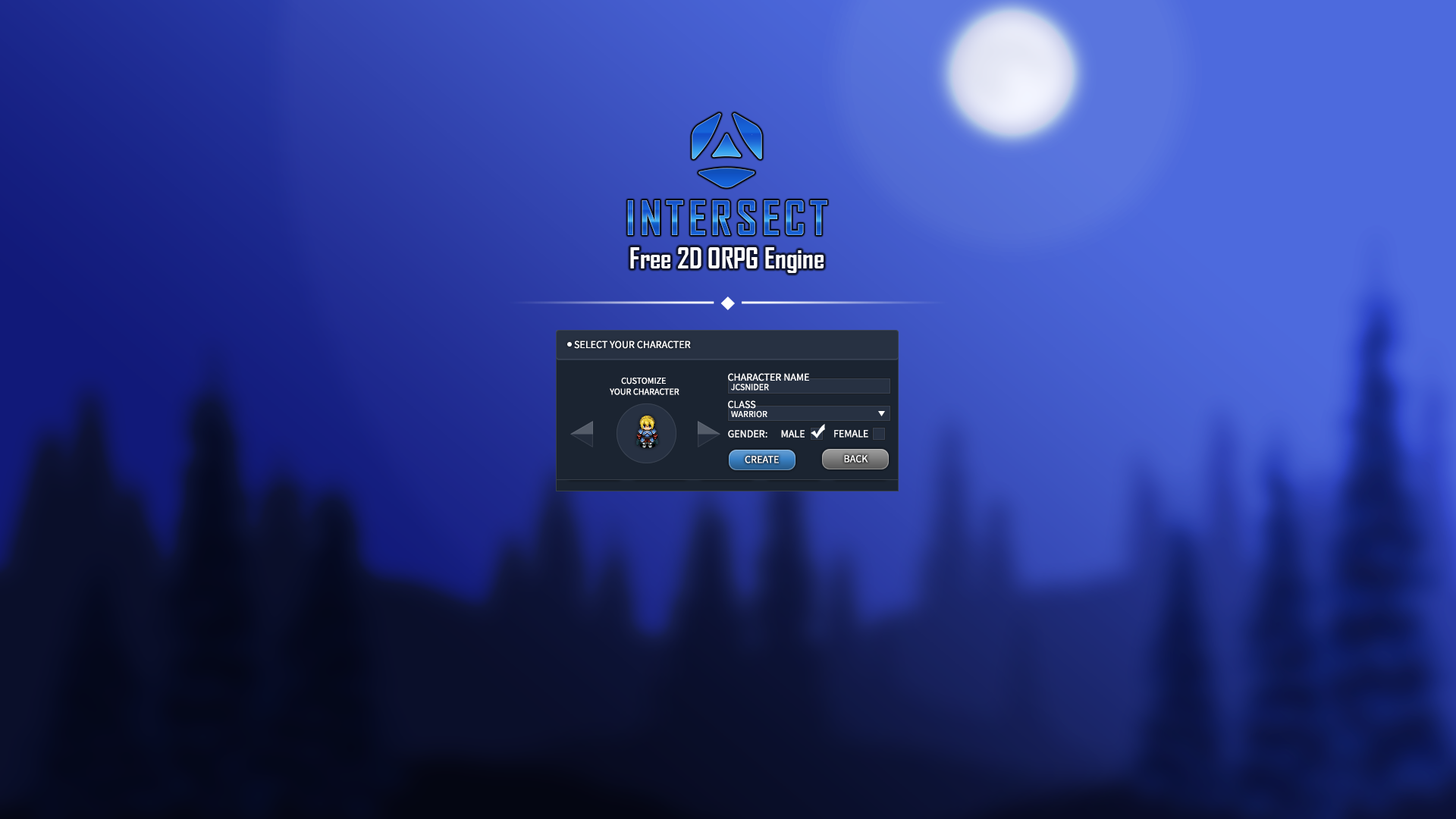
<style>
.page{position:relative;width:1456px;height:819px}
.page>*{position:absolute;margin:0}
.t1{font:45.5px "AgencyFB-Bold";letter-spacing:0.1em}
.t2{font:27.3px "AgencyFB-Bold";color:#ffffff}
.t3{font:10.6px "SourceSansPro-Regular";color:#ffffff;text-transform:uppercase}
.t4{font:9.1px "SourceSansPro-Regular";color:#ffffff;text-transform:uppercase}
</style>
<div class="page">
<p class="t1" style="left:627px;top:200px;width:200px;height:35px">INTERSECT</p>
<p class="t2" style="left:630px;top:247px;width:194px;height:26px">Free 2D ORPG Engine</p>
<p class="t3" style="left:574px;top:340px;width:117px;height:9px">Select Your Character</p>
<p class="t3" style="left:574px;top:340px;width:117px;height:9px">Select Your Character</p>
<p class="t4" style="left:610px;top:377px;width:69px;height:18px;text-align:center">Customize <br>your character</p>
<p class="t3" style="left:728px;top:373px;width:81px;height:8px">Character Name</p>
<p class="t4" style="left:731px;top:384px;width:38px;height:7px">JCSNIDER</p>
<p class="t3" style="left:728px;top:400px;width:28px;height:9px">Class</p>
<p class="t4" style="left:731px;top:410px;width:36px;height:8px">warrior</p>
<p class="t3" style="left:728px;top:430px;width:39px;height:8px">Gender:</p>
<p class="t3" style="left:781px;top:430px;width:24px;height:8px">Male</p>
<p class="t3" style="left:834px;top:430px;width:34px;height:8px">FEMALE</p>
<p class="t3" style="left:745px;top:456px;width:34px;height:7px">CREATE</p>
<p class="t3" style="left:844px;top:455px;width:24px;height:8px">Back</p>
</div>
